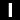
<style>
.page{position:relative;width:20px;height:20px;background:#000000}
.page>*{position:absolute;margin:0}
.t1{font:20px "HelveticaNeue-Bold";color:#ffffff}
</style>
<div class="page">
<p class="t1" style="left:8px;top:3px;width:4px;height:14px">I</p>
</div>
